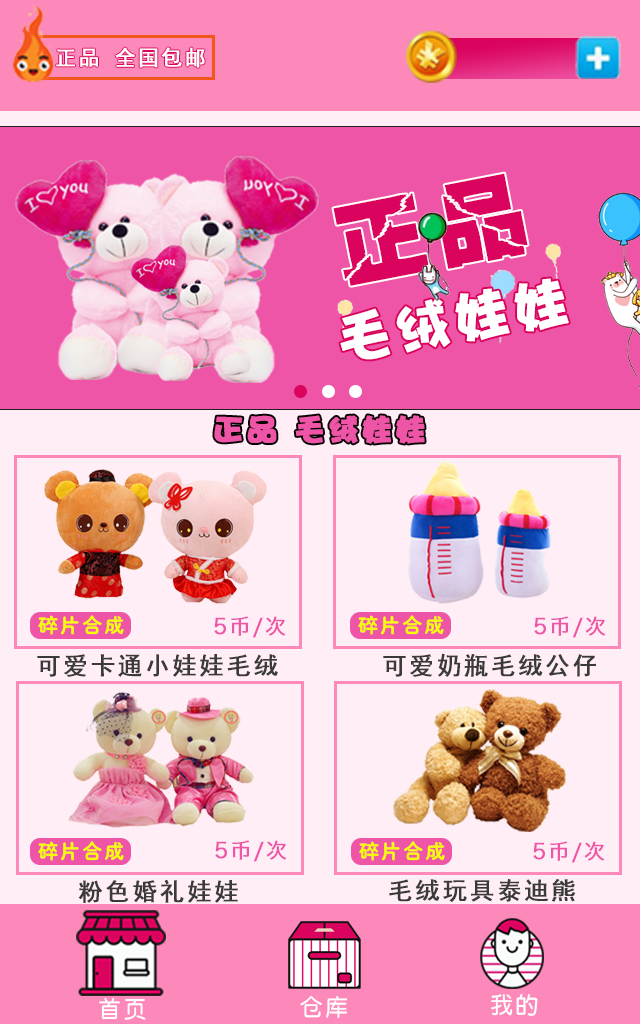
<style>
.page{position:relative;width:640px;height:1024px;background:#ffeef5}
.page>*{position:absolute;margin:0}
.t1{font:21.3px "SimHei";letter-spacing:0.096em;color:#ffffff;font-weight:bold}
.t2{font:93.6px "PiliEG-Ultra-GB";letter-spacing:0.096em;color:#da035e}
.t3{font:54.6px "DFPHaiBaoW12";letter-spacing:0.096em;color:#ffffff}
.t4{font:30px "DFPHaiBaoW12";letter-spacing:0.096em;color:#ee55a6;font-weight:bold}
.t5{font:20px "ç»å¸ç²åç®-regular";letter-spacing:0.096em;color:#f6ff00}
.t6{font:21.1px "MingHei_R";letter-spacing:0.096em;color:#ee55a6;font-weight:bold}
.t7{font:24.6px "SimHei";letter-spacing:0.096em;color:#3a3a3a;font-weight:bold}
.t8{font:23.3px "By-JOSSQ-DMF-in-BeiJing";letter-spacing:0.096em;color:#ffffff}
</style>
<div class="page">
<p class="t1" style="left:56px;top:47px;width:149px;height:21px">正品 全国包邮</p>
<p class="t2" style="left:333px;top:173px;width:195px;height:113px;rotate:-11deg">正品</p>
<p class="t3" style="left:340px;top:278px;width:229px;height:82px;rotate:-10deg">毛绒娃娃</p>
<p class="t4" style="left:214px;top:415px;width:211px;height:29px">正品 毛绒娃娃</p>
<p class="t5" style="left:38px;top:615px;width:86px;height:20px">碎片合成</p>
<p class="t6" style="left:214px;top:616px;width:72px;height:22px">5币/次</p>
<p class="t5" style="left:358px;top:615px;width:86px;height:20px">碎片合成</p>
<p class="t6" style="left:534px;top:616px;width:72px;height:22px">5币/次</p>
<p class="t7" style="left:37px;top:654px;width:241px;height:23px">可爱卡通小娃娃毛绒</p>
<p class="t7" style="left:383px;top:653px;width:213px;height:24px">可爱奶瓶毛绒公仔</p>
<p class="t5" style="left:38px;top:841px;width:86px;height:20px">碎片合成</p>
<p class="t6" style="left:215px;top:840px;width:72px;height:22px">5币/次</p>
<p class="t5" style="left:359px;top:841px;width:86px;height:20px">碎片合成</p>
<p class="t6" style="left:533px;top:841px;width:72px;height:22px">5币/次</p>
<p class="t7" style="left:78px;top:880px;width:160px;height:23px">粉色婚礼娃娃</p>
<p class="t7" style="left:389px;top:879px;width:187px;height:23px">毛绒玩具泰迪熊</p>
<p class="t8" style="left:99px;top:998px;width:47px;height:22px">首页</p>
<p class="t8" style="left:300px;top:996px;width:48px;height:22px">仓库</p>
<p class="t8" style="left:491px;top:994px;width:47px;height:22px">我的</p>
</div>
